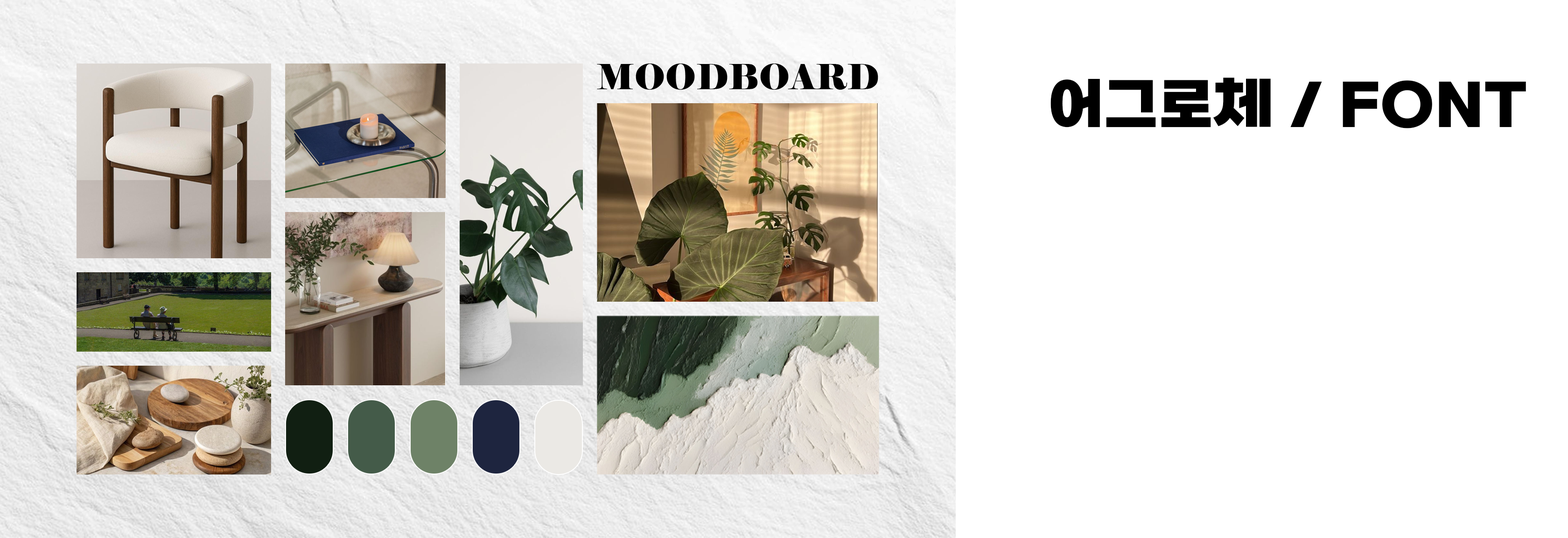
<style>
.page{position:relative;width:1568px;height:538px;background:#ffffff}
.page>*{position:absolute;margin:0}
.t1{font:34.3px "Elephant-Regular";color:#000000;text-transform:uppercase}
.t2{font:56.9px "SBAggroB";color:#000000;text-transform:uppercase}
</style>
<div class="page">
<p class="t1" style="left:597px;top:63px;width:281px;height:27px">moodboard</p>
<p class="t2" style="left:1050px;top:77px;width:476px;height:51px">어그로체 / FONT</p>
</div>
